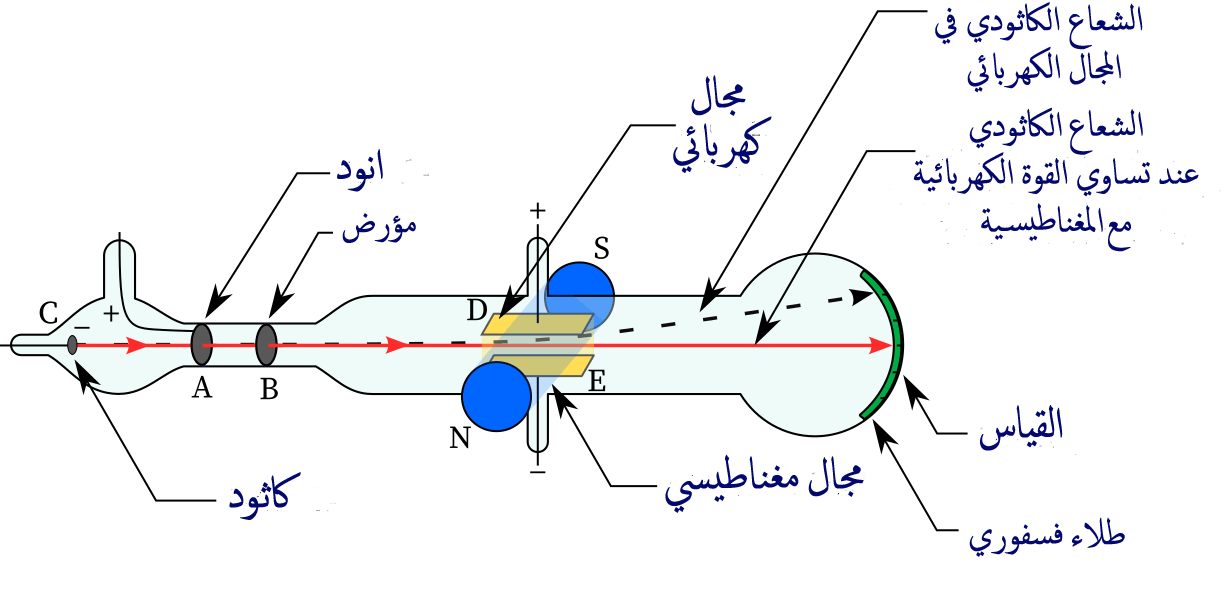
<style>
.page{position:relative;width:1229px;height:591px;background:#ffffff}
.page>*{position:absolute;margin:0}
.t1{font:48px/16px "ArabicTypesetting";letter-spacing:-0.015em;color:#03086e;font-weight:bold}
.t2{font:60px/16px "ArabicTypesetting";letter-spacing:-0.015em;color:#03086e;font-weight:bold}
.t3{font:60px "ArabicTypesetting";letter-spacing:-0.015em;color:#03086e;font-weight:bold}
.t4{font:48px "ArabicTypesetting";letter-spacing:-0.015em;color:#03086e;font-weight:bold}
</style>
<div class="page">
<p class="t1" style="left:935px;top:2px;width:208px;height:91px;text-align:center">الشعاع الكاثودي في <br><br><br>المجال الكهربائي</p>
<p class="t2" style="left:673px;top:75px;width:99px;height:98px;text-align:center">مجال<br><br><br>كهربائي</p>
<p class="t3" style="left:337px;top:149px;width:46px;height:43px">انود</p>
<p class="t4" style="left:342px;top:213px;width:74px;height:30px">مؤرض</p>
<p class="t3" style="left:980px;top:405px;width:83px;height:46px">القياس</p>
<p class="t3" style="left:665px;top:454px;width:199px;height:59px">مجال مغناطيسي</p>
<p class="t3" style="left:229px;top:472px;width:72px;height:48px">كاثود</p>
<p class="t4" style="left:969px;top:517px;width:156px;height:40px">طلاء فسفوري</p>
</div>
